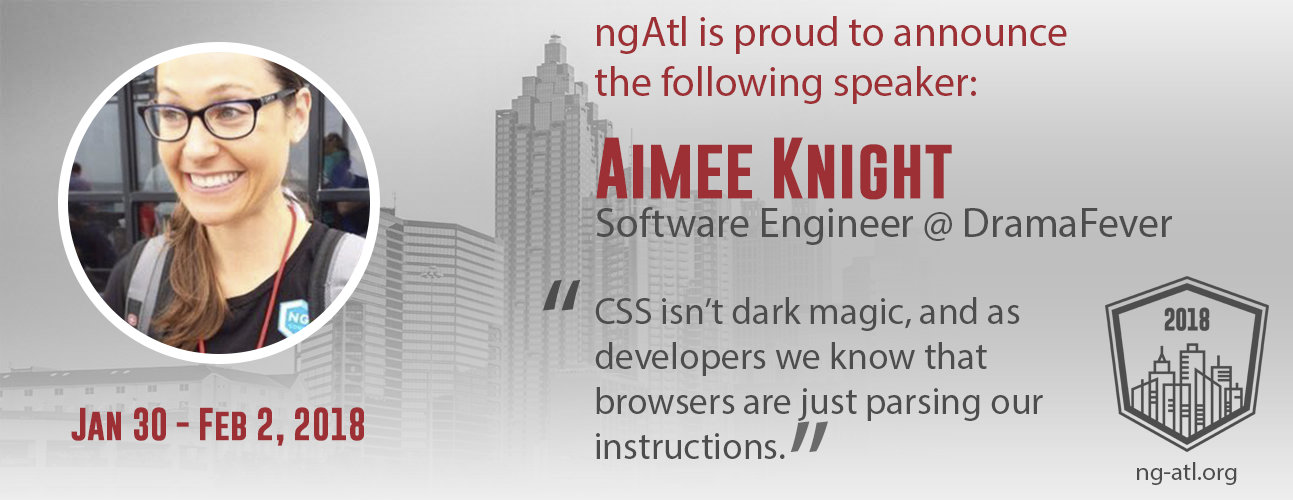
<style>
.page{position:relative;width:1293px;height:500px}
.page>*{position:absolute;margin:0}
.t1{font:41.7px "MyriadPro-Regular";color:#9d3035}
.t2{font:62.5px "GoboldBold";color:#9d3035}
.t3{font:41.7px "MyriadPro-Regular";color:#4d4d4e}
.t4{font:125px "MyriadPro-Regular";color:#4d4d4e}
.t5{font:37.5px "MyriadPro-Regular";color:#4d4d4e}
.t6{font:33.3px "GoboldBold";color:#9d3035}
.t7{font:125px "MyriadPro-Regular";color:#6a6a6b}
.t8{font:25px "MyriadPro-Regular";color:#4d4d4e}
</style>
<div class="page">
<p class="t1" style="left:595px;top:16px;width:472px;height:88px">ngAtl is proud to announce the following speaker:</p>
<p class="t2" style="left:596px;top:137px;width:356px;height:63px">Aimee Knight</p>
<p class="t3" style="left:596px;top:207px;width:576px;height:38px">Software Engineer @ DramaFever</p>
<p class="t4" style="left:543px;top:279px;width:38px;height:32px">“</p>
<p class="t5" style="left:595px;top:297px;width:448px;height:162px">CSS isn’t dark magic, and as developers we know that browsers are just parsing our instructions.</p>
<p class="t6" style="left:71px;top:407px;width:293px;height:39px">Jan 30 - Feb 2, 2018</p>
<p class="t7" style="left:790px;top:421px;width:38px;height:32px;rotate:180deg">“</p>
<p class="t8" style="left:1137px;top:462px;width:100px;height:23px">ng-atl.org</p>
</div>
